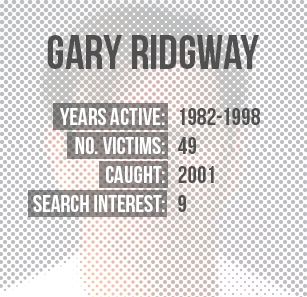
<style>
.page{position:relative;width:307px;height:297px;background:#ffffff}
.page>*{position:absolute;margin:0}
.t1{font:48px "BebasNeue";color:#505050}
.t2{font:24px "BebasNeue";color:#ffffff}
.t3{font:24px/125px "BebasNeue";color:#ffffff}
.t4{font:24px/125px "BebasNeue";color:#505050}
.t5{font:24px "BebasNeue";color:#505050}
</style>
<div class="page">
<p class="t1" style="left:47px;top:35px;width:212px;height:34px">GARY RIDGWAY</p>
<p class="t2" style="left:33px;top:108px;width:132px;height:104px;text-align:right"><span class="t3">YEARS ACTIVE:<br></span>No. Victims:<br>cAUGHT:<br>SEARCH INTEREST:</p>
<p class="t4" style="left:178px;top:108px;width:82px;height:104px">1982-1998<br><span class="t5">49<br>2001<br>9</span></p>
</div>
